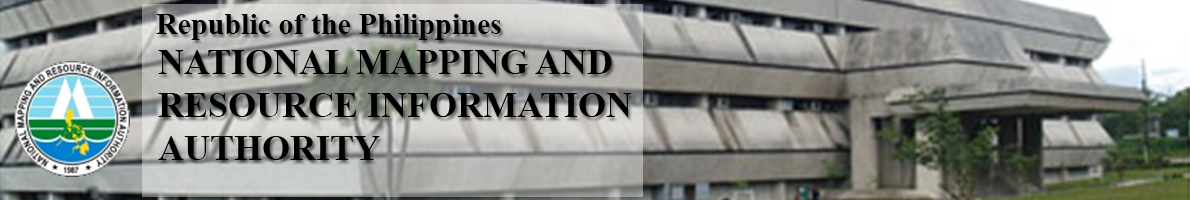
<style>
.page{position:relative;width:1190px;height:200px}
.page>*{position:absolute;margin:0}
.t1{font:30px "TimesNewRomanPS-BoldMT";color:#000000}
.t2{font:36px "TimesNewRomanPS-BoldMT";color:#000000}
</style>
<div class="page">
<p class="t1" style="left:156px;top:14px;width:345px;height:26px">Republic of the Philippines</p>
<p class="t2" style="left:158px;top:50px;width:474px;height:110px;text-align:right">NATIONAL MAPPING AND<br>RESOURCE INFORMATION<br>AUTHORITY</p>
</div>
